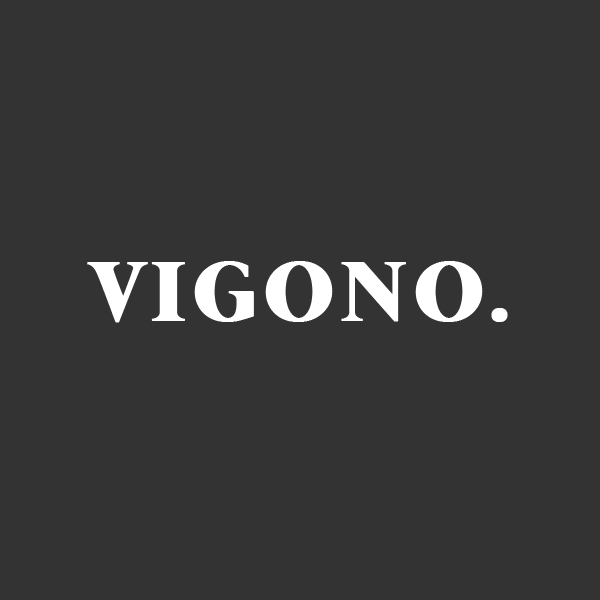
<style>
.page{position:relative;width:600px;height:600px;background:#333333}
.page>*{position:absolute;margin:0}
.t1{font:86px "Mermaid-Bold";letter-spacing:0.08em;color:#ffffff;text-transform:uppercase;font-weight:bold;scale:1.05 1}
</style>
<div class="page">
<p class="t1" style="left:87px;top:261px;width:421px;height:62px">Vigono.</p>
</div>
